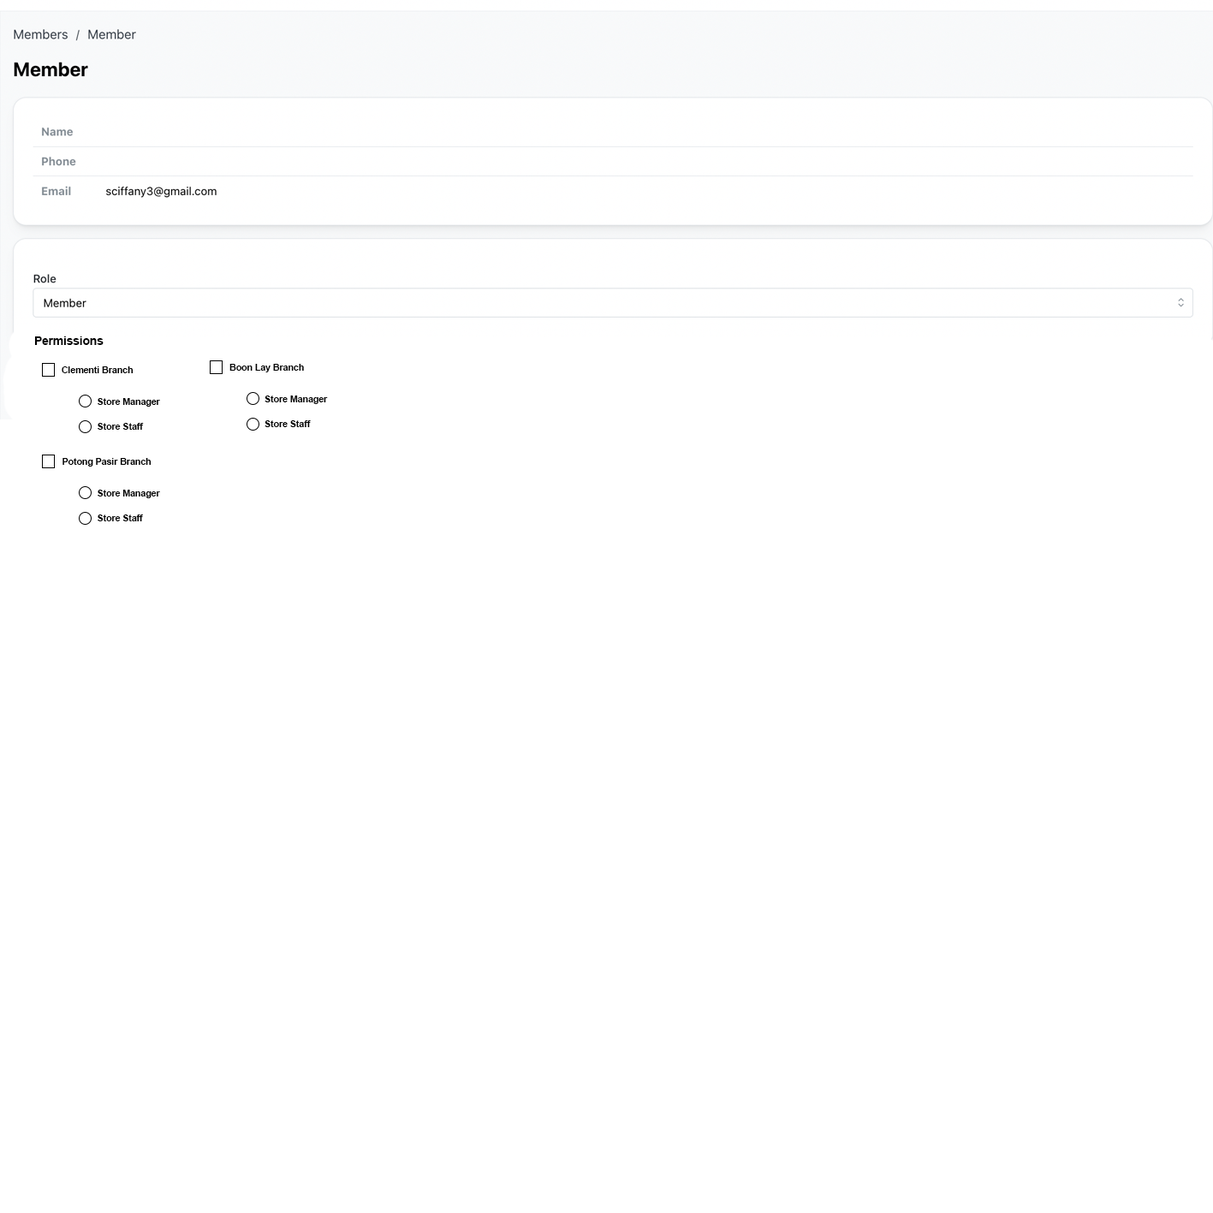
<style>
.page{position:relative;width:1213px;height:1213px;background:#ffffff}
.page>*{position:absolute;margin:0}
.t1{font:11.6px "Arial-BoldMT";color:#000000}
.t2{font:9px "Arial-BoldMT";color:#000000}
</style>
<div class="page">
<p class="t1" style="left:34px;top:336px;width:70px;height:9px">Permissions</p>
<p class="t2" style="left:229px;top:364px;width:75px;height:8px">Boon Lay Branch</p>
<p class="t2" style="left:62px;top:366px;width:71px;height:7px">Clementi Branch</p>
<p class="t2" style="left:98px;top:398px;width:62px;height:8px">Store Manager</p>
<p class="t2" style="left:264px;top:395px;width:64px;height:9px">Store Manager</p>
<p class="t2" style="left:98px;top:423px;width:46px;height:7px">Store Staff</p>
<p class="t2" style="left:264px;top:420px;width:47px;height:7px">Store Staff</p>
<p class="t2" style="left:62px;top:458px;width:89px;height:8px">Potong Pasir Branch</p>
<p class="t2" style="left:98px;top:489px;width:62px;height:9px">Store Manager</p>
<p class="t2" style="left:98px;top:514px;width:45px;height:7px">Store Staff</p>
</div>
